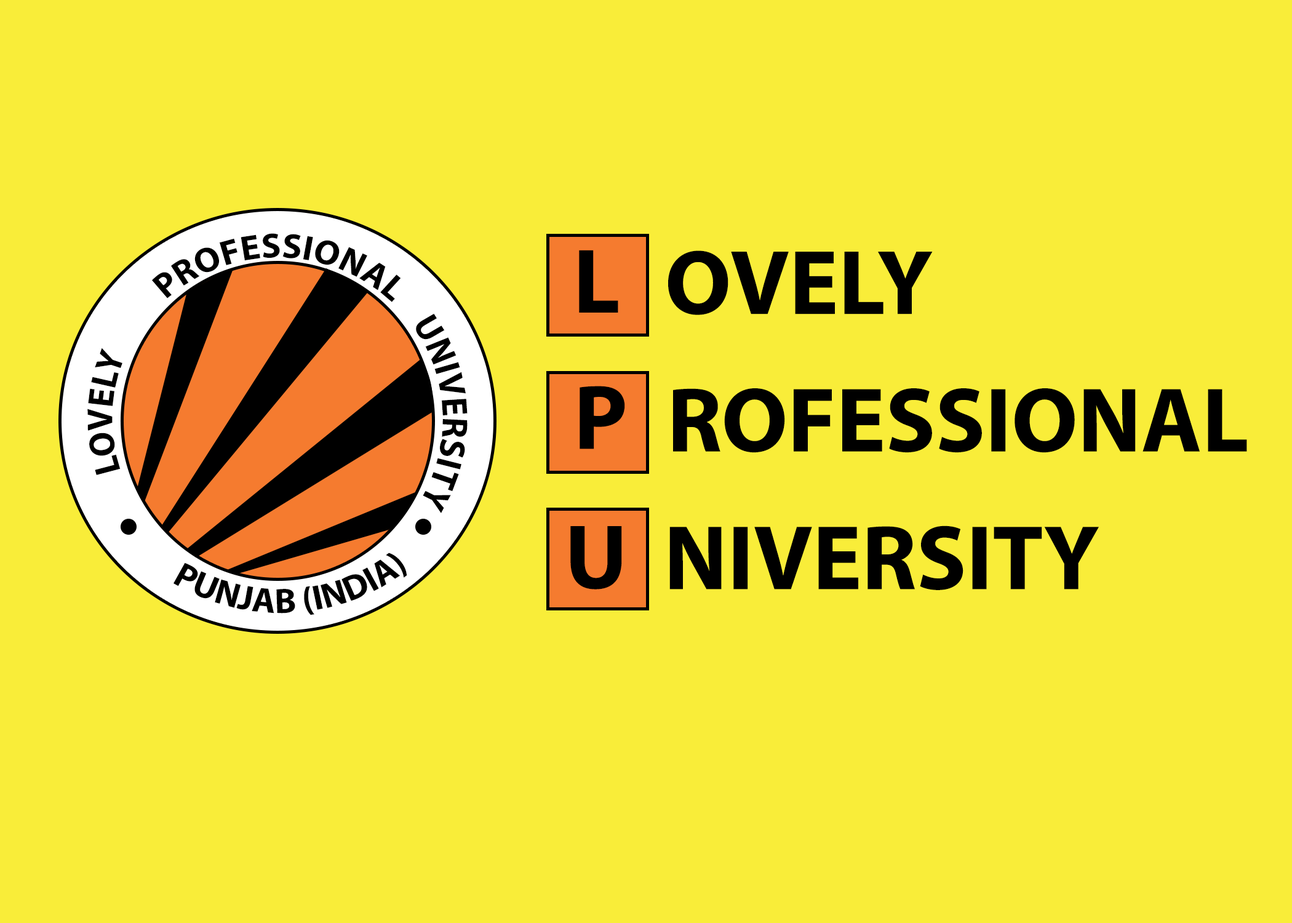
<style>
.page{position:relative;width:1292px;height:923px;background:#f9ed39}
.page>*{position:absolute;margin:0}
.t1{font:34.9px "MyriadPro-Bold";color:#000000;scale:1.04 1}
.t2{font:92.3px "MyriadPro-Bold";color:#000000}
.t3{font:35.9px "MyriadPro-Bold";color:#000000}
</style>
<div class="page">
<p class="t1" style="left:87px;top:233px;width:381px;height:280px">LOVELY    PROFESSIONAL   UNIVERSITY</p>
<p class="t2" style="left:579px;top:250px;width:39px;height:63px">L</p>
<p class="t2" style="left:668px;top:250px;width:265px;height:65px">OVELY</p>
<p class="t2" style="left:580px;top:386px;width:45px;height:63px">P</p>
<p class="t2" style="left:673px;top:388px;width:574px;height:65px">ROFESSIONALl</p>
<p class="t2" style="left:570px;top:526px;width:52px;height:63px">U</p>
<p class="t2" style="left:669px;top:525px;width:430px;height:65px">NIVERSITY</p>
<p class="t3" style="left:174px;top:553px;width:233px;height:62px;rotate:75deg">PUNJAB (INDIA)</p>
</div>
